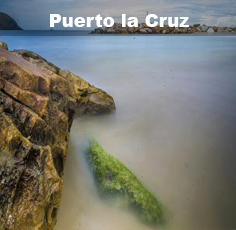
<style>
.page{position:relative;width:236px;height:230px}
.page>*{position:absolute;margin:0}
.t1{font:18px "Arial-Black";color:#ffffff}
</style>
<div class="page">
<p class="t1" style="left:50px;top:14px;width:139px;height:13px">Puerto la Cruz</p>
</div>
